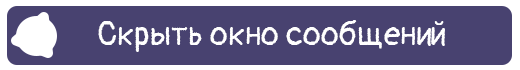
<style>
.page{position:relative;width:520px;height:70px;background:#484270}
.page>*{position:absolute;margin:0}
.t1{font:33px "Pangolin-Regular";color:#ffffff}
</style>
<div class="page">
<p class="t1" style="left:98px;top:20px;width:347px;height:32px">Скрыть окно сообщений</p>
</div>
